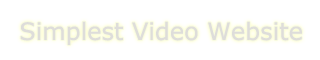
<style>
.page{position:relative;width:320px;height:60px;background:#ffffff}
.page>*{position:absolute;margin:0}
.t1{font:24px "MSReferenceSansSerif";color:#deddda}
</style>
<div class="page">
<p class="t1" style="left:20px;top:21px;width:282px;height:24px">Simplest Video Website</p>
</div>
